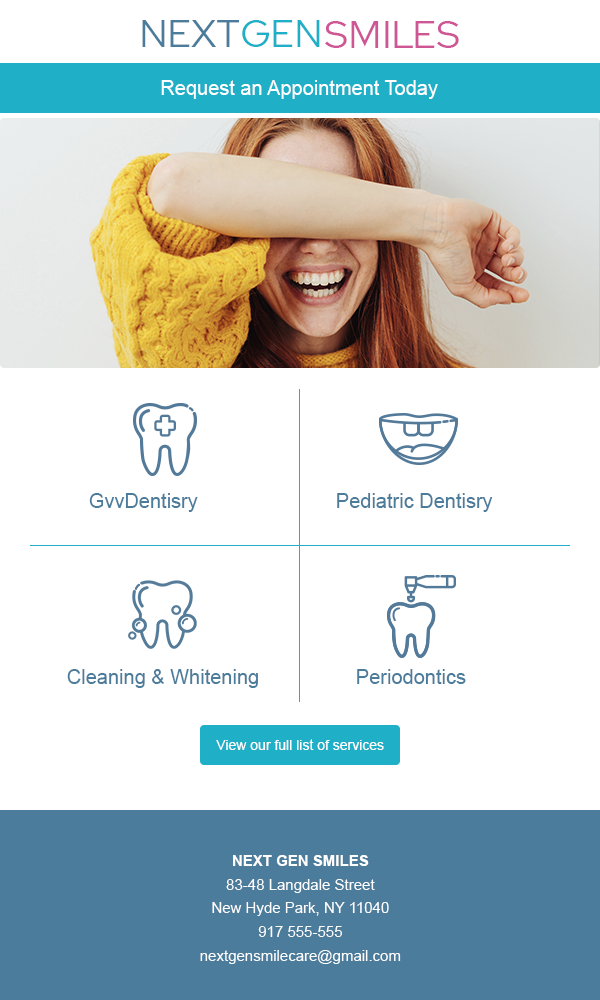
<style>
.page{position:relative;width:600px;height:1000px;background:#ffffff}
.page>*{position:absolute;margin:0}
.t1{font:38.6px "RedHatText-Regular";color:#4b7c9c}
.t2{font:38.6px "RedHatText-Regular";color:#1fb0c8}
.t3{font:38.6px "RedHatText-Regular";color:#cf5695}
.t4{font:20px "ArialMT";color:#ffffff}
.t5{font:20px "ArialMT";color:#4b7c9c}
.t6{font:14px "ArialMT";color:#ffffff}
.t7{font:15px/20px "ArialMT";color:#ffffff}
.t8{font:15px/20px "Arial-BoldMT";color:#ffffff}
</style>
<div class="page">
<p class="t1" style="left:142px;top:20px;width:97px;height:27px">NEXT</p>
<p class="t2" style="left:242px;top:20px;width:78px;height:27px">GEN</p>
<p class="t3" style="left:325px;top:21px;width:134px;height:27px">SMILES</p>
<p class="t4" style="left:161px;top:80px;width:277px;height:19px">Request an Appointment Today</p>
<p class="t5" style="left:89px;top:493px;width:109px;height:19px">GvvDentisry</p>
<p class="t5" style="left:337px;top:493px;width:156px;height:19px">Pediatric Dentisry</p>
<p class="t5" style="left:67px;top:669px;width:191px;height:19px">Cleaning &amp; Whitening</p>
<p class="t5" style="left:357px;top:669px;width:109px;height:15px">Periodontics</p>
<p class="t6" style="left:216px;top:739px;width:168px;height:11px">View our full list of services</p>
<p class="t7" style="left:200px;top:855px;width:201px;height:109px;text-align:center"><span class="t8">NEXT GEN SMILES<br></span>83-48 Langdale Street<br>New Hyde Park, NY 11040<br>917 555-555<br>nextgensmilecare@gmail.com</p>
</div>
